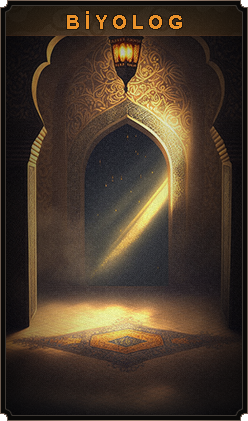
<style>
.page{position:relative;width:248px;height:421px}
.page>*{position:absolute;margin:0}
.t1{font:18.7px "Arial-BoldMT";color:#eb922a}
</style>
<div class="page">
<p class="t1" style="left:67px;top:11px;width:115px;height:18px">B İ Y O L O G</p>
</div>
